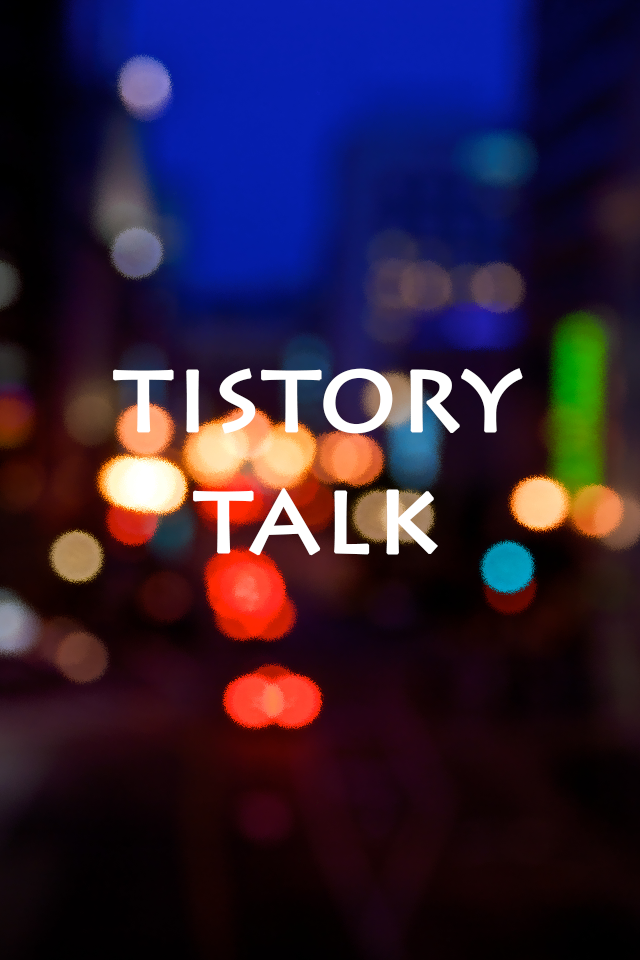
<style>
.page{position:relative;width:640px;height:960px}
.page>*{position:absolute;margin:0}
.t1{font:100.1px "LithosPro-Regular";color:#ffffff;font-weight:bold}
</style>
<div class="page">
<p class="t1" style="left:113px;top:368px;width:410px;height:188px;text-align:center">tistory<br>talk</p>
</div>
